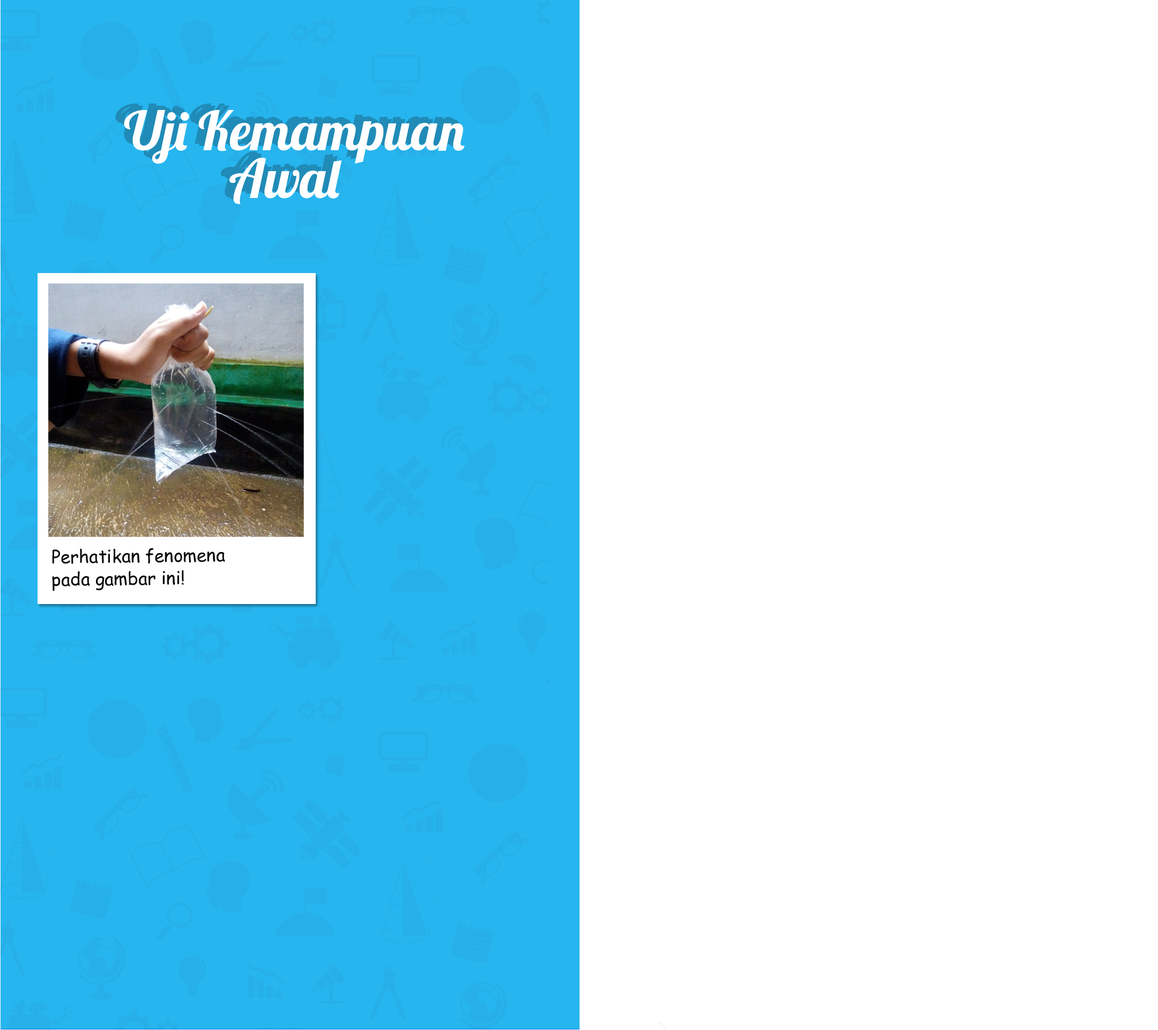
<style>
.page{position:relative;width:1158px;height:1030px;background:#ffffff}
.page>*{position:absolute;margin:0}
.t1{font:53.5px/47.6px "Lobster-Regular"}
.t2{font:53.5px/47.6px "Lobster-Regular";color:#208bb7}
.t3{font:53.5px/47.6px "Lobster-Regular";color:#ffffff}
.t4{font:17.9px/22.3px "ComicSansMS";color:#0a0909}
</style>
<div class="page">
<p class="t1" style="left:115px;top:103px;width:341px;height:95px">Uji Kemampuan<br>         Awal</p>
<p class="t2" style="left:120px;top:106px;width:341px;height:94px">Uji Kemampuan<br>         Awal</p>
<p class="t3" style="left:124px;top:110px;width:341px;height:94px">Uji Kemampuan<br>         Awal</p>
<p class="t4" style="left:52px;top:547px;width:173px;height:44px;text-align:justify;rotate:-1deg">Perhatikan fenomena <br>pada gambar ini!</p>
</div>
